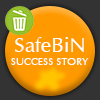
<style>
.page{position:relative;width:100px;height:100px;background:#ff9900}
.page>*{position:absolute;margin:0}
.t1{font:20.8px "Ace";color:#ffffff}
.t2{font:10.4px "Ace";color:#ffffff}
</style>
<div class="page">
<p class="t1" style="left:15px;top:37px;width:69px;height:15px">SafeBiN</p>
<p class="t2" style="left:11px;top:58px;width:78px;height:7px">SUCCESS STORY</p>
</div>
